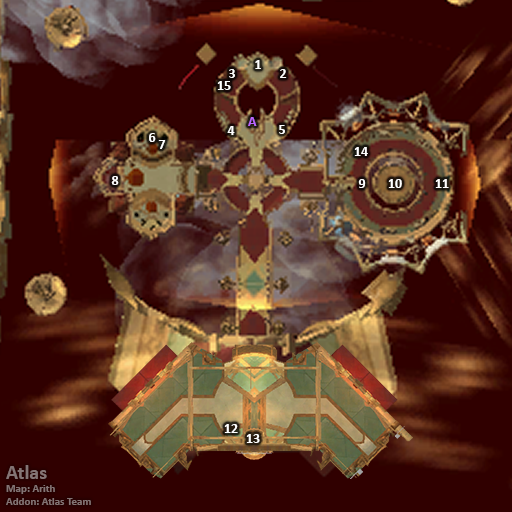
<style>
.page{position:relative;width:512px;height:512px;background:#300000}
.page>*{position:absolute;margin:0}
.t1{font:14px "Calibri-Bold";color:#ffffff}
.t2{font:14px "Calibri-Bold";color:#bb66ff}
.t3{font:11px "Calibri-Bold";color:#847474}
.t4{font:20px "Calibri-Bold";color:#847474}
</style>
<div class="page">
<p class="t1" style="left:255px;top:60px;width:6px;height:9px">1</p>
<p class="t1" style="left:229px;top:69px;width:6px;height:9px">3</p>
<p class="t1" style="left:280px;top:69px;width:7px;height:9px">2</p>
<p class="t1" style="left:217px;top:81px;width:14px;height:9px">15</p>
<p class="t1" style="left:227px;top:126px;width:8px;height:9px">4</p>
<p class="t2" style="left:248px;top:117px;width:9px;height:9px">A</p>
<p class="t1" style="left:279px;top:125px;width:6px;height:9px">5</p>
<p class="t1" style="left:149px;top:133px;width:7px;height:9px">6</p>
<p class="t1" style="left:158px;top:140px;width:8px;height:9px">7</p>
<p class="t1" style="left:354px;top:147px;width:14px;height:9px">14</p>
<p class="t1" style="left:111px;top:176px;width:8px;height:9px">8</p>
<p class="t1" style="left:358px;top:179px;width:8px;height:9px">9</p>
<p class="t1" style="left:388px;top:179px;width:14px;height:9px">10</p>
<p class="t1" style="left:435px;top:179px;width:14px;height:9px">11</p>
<p class="t1" style="left:224px;top:424px;width:14px;height:9px">12</p>
<p class="t1" style="left:246px;top:434px;width:14px;height:9px">13</p>
<p class="t3" style="left:6px;top:465px;width:85px;height:40px"><span class="t4">Atlas<br></span>Map: Arith<br>Addon: Atlas Team</p>
</div>
